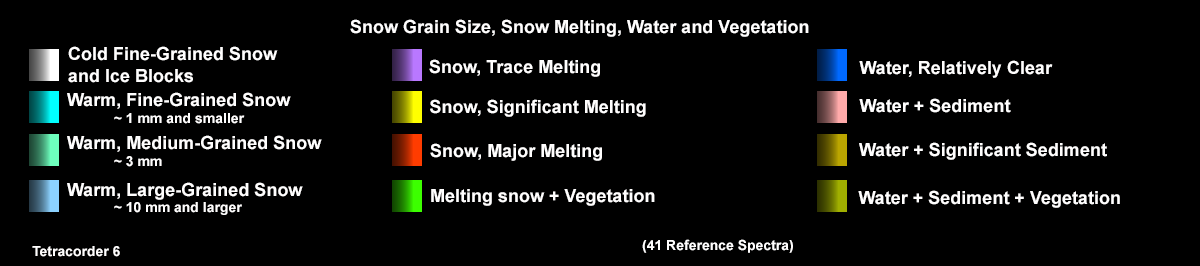
<style>
.page{position:relative;width:1200px;height:266px;background:#000000}
.page>*{position:absolute;margin:0}
.t1{font:18px "Arial-BoldMT";color:#fffefe}
.t2{font:14px "Arial-BoldMT";color:#fffefe}
</style>
<div class="page">
<p class="t1" style="left:350px;top:19px;width:459px;height:18px">Snow Grain Size, Snow Melting, Water and Vegetation</p>
<p class="t1" style="left:68px;top:46px;width:210px;height:37px">Cold Fine-Grained Snow<br>and Ice Blocks</p>
<p class="t1" style="left:429px;top:59px;width:171px;height:18px">Snow, Trace Melting</p>
<p class="t1" style="left:859px;top:60px;width:194px;height:18px">Water, Relatively Clear</p>
<p class="t1" style="left:67px;top:92px;width:224px;height:32px">Warm, Fine-Grained Snow<br><span class="t2">            ~ 1 mm and smaller</span></p>
<p class="t1" style="left:430px;top:99px;width:216px;height:18px">Snow, Significant Melting</p>
<p class="t1" style="left:859px;top:98px;width:152px;height:15px">Water + Sediment</p>
<p class="t1" style="left:67px;top:135px;width:255px;height:32px">Warm, Medium-Grained Snow<br><span class="t2">            ~ 3 mm</span></p>
<p class="t1" style="left:430px;top:143px;width:172px;height:18px">Snow, Major Melting</p>
<p class="t1" style="left:859px;top:142px;width:248px;height:18px">Water + Significant Sediment</p>
<p class="t1" style="left:67px;top:182px;width:236px;height:33px">Warm, Large-Grained Snow<br><span class="t2">            ~ 10 mm and larger</span></p>
<p class="t1" style="left:431px;top:189px;width:224px;height:17px">Melting snow + Vegetation</p>
<p class="t1" style="left:858px;top:190px;width:262px;height:18px">Water + Sediment + Vegetation</p>
<p class="t2" style="left:32px;top:246px;width:88px;height:11px">Tetracorder 6</p>
<p class="t2" style="left:642px;top:239px;width:151px;height:14px">(41 Reference Spectra)</p>
</div>
